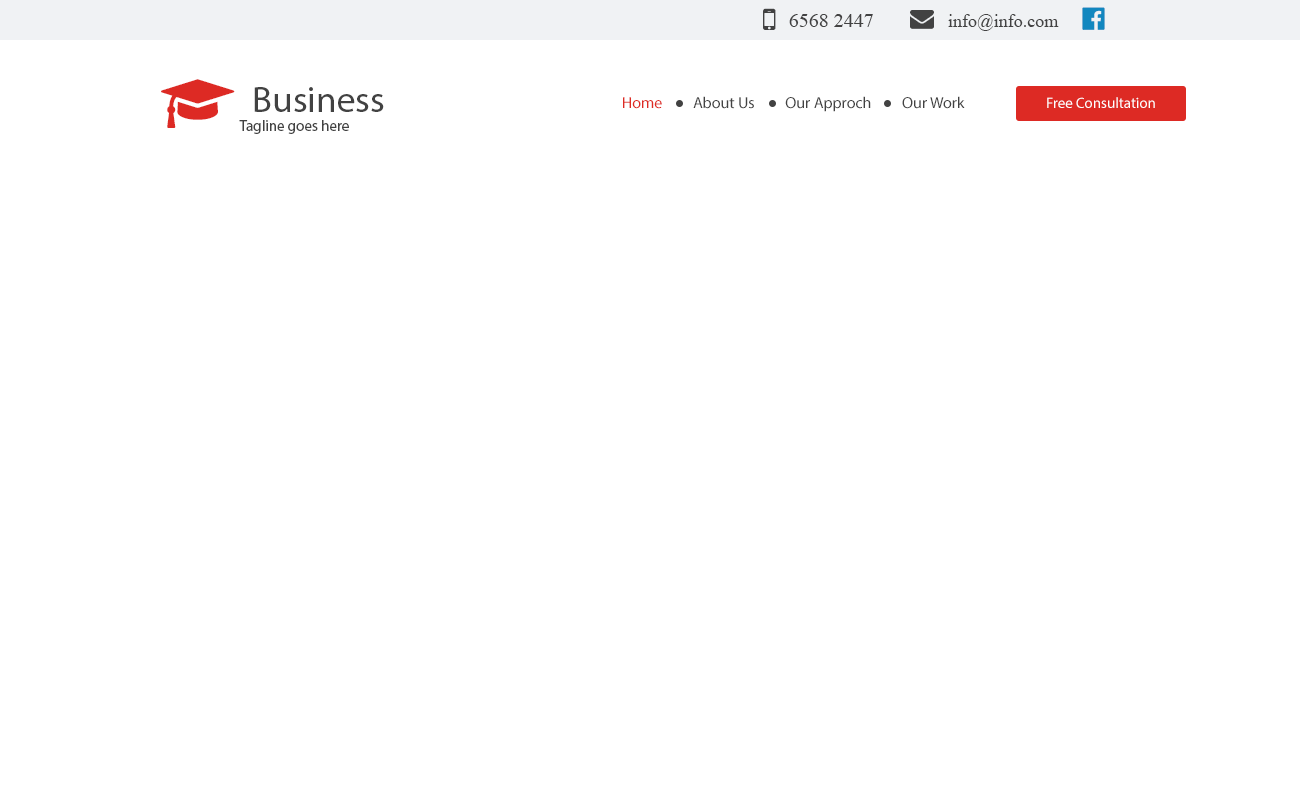
<style>
.page{position:relative;width:1300px;height:800px;background:#ffffff}
.page>*{position:absolute;margin:0}
.t1{font:20px "TimesNewRomanPSMT";color:#424242}
.t2{font:18px "TimesNewRomanPSMT";color:#424242}
.t3{font:37px "MyriadPro-Regular";color:#424242}
.t4{font:16px "MyriadPro-Regular";color:#424242}
.t5{font:16px "MyriadPro-Regular";color:#de2b24}
.t6{font:15px "MyriadPro-Regular";color:#ffffff}
.t7{font:15px "MyriadPro-Regular";color:#424242}
</style>
<div class="page">
<p class="t1" style="left:789px;top:14px;width:84px;height:13px">6568 2447</p>
<p class="t2" style="left:948px;top:14px;width:111px;height:17px">info@info.com</p>
<p class="t3" style="left:254px;top:87px;width:130px;height:25px">Business</p>
<p class="t4" style="left:623px;top:96px;width:342px;height:16px"><span class="t5">Home</span>         About Us         Our Approch         Our Work</p>
<p class="t6" style="left:1047px;top:97px;width:108px;height:11px">Free Consultation</p>
<p class="t7" style="left:239px;top:120px;width:110px;height:14px">Tagline goes here</p>
</div>
